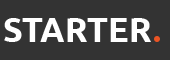
<style>
.page{position:relative;width:170px;height:60px;background:#333333}
.page>*{position:absolute;margin:0}
.t1{font:34px "Ubuntu-Bold";color:#ffffff}
</style>
<div class="page">
<p class="t1" style="left:4px;top:18px;width:147px;height:24px">STARTER</p>
</div>
